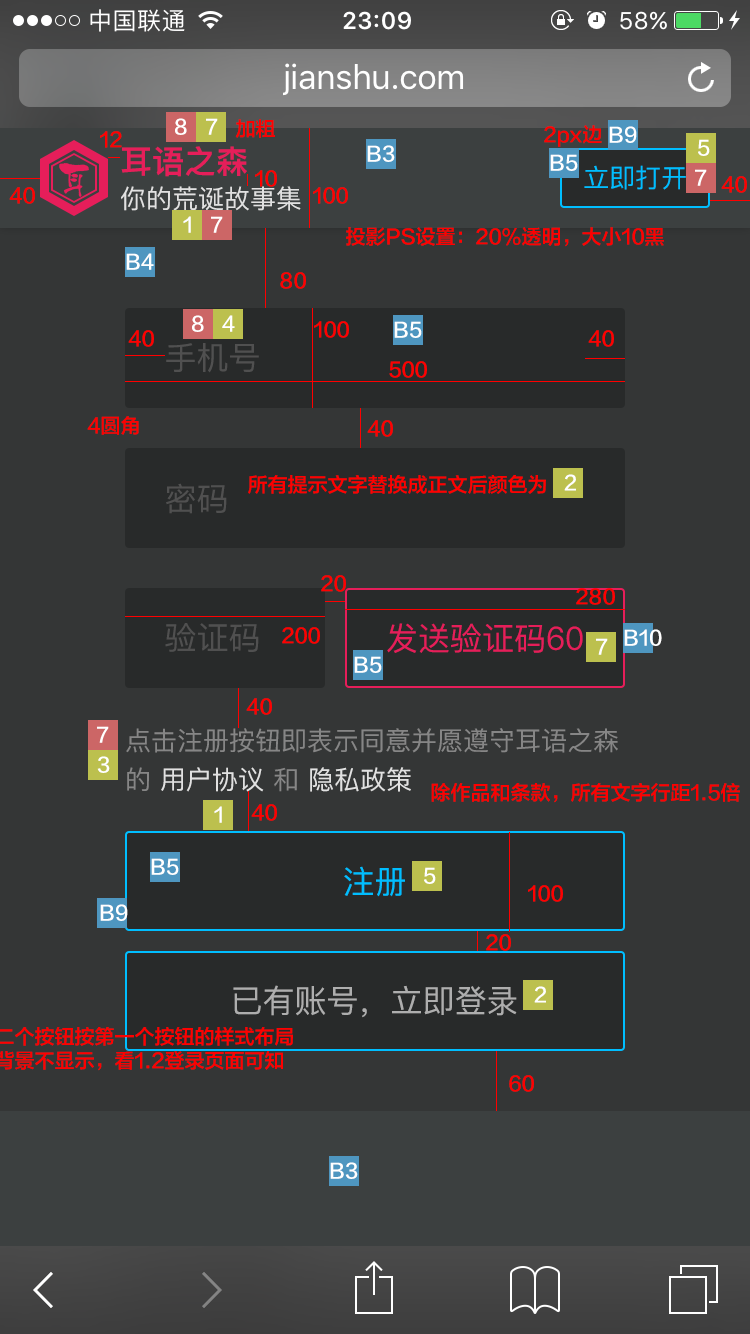
<style>
.page{position:relative;width:750px;height:1334px;background:#343636}
.page>*{position:absolute;margin:0}
.t1{font:20px "FZLTZHK--GBK1-0";color:#ffffff}
.t2{font:20px "FZLTZHK--GBK1-0";color:#ff0000}
.t3{font:32px "PingFangSC-Semibold";color:#e61e5a}
.t4{font:26px "PingFangSC-Regular";color:#00beff}
.t5{font:26px "PingFangSC-Regular";color:#e1e1e1}
.t6{font:32px "PingFangSC-Regular";color:#505050}
.t7{font:32px "PingFangSC-Regular";color:#e61e5a}
.t8{font:26px/39px "PingFangSC-Regular";color:#868686}
.t9{font:26px/39px "PingFangSC-Regular";color:#e1e1e1}
.t10{font:32px "PingFangSC-Regular";color:#00beff}
.t11{font:32px "PingFangSC-Regular";color:#aeaeae}
</style>
<div class="page">
<p class="t1" style="left:175px;top:118px;width:12px;height:17px">8</p>
<p class="t1" style="left:206px;top:118px;width:12px;height:17px">7</p>
<p class="t2" style="left:235px;top:119px;width:40px;height:19px">加粗</p>
<p class="t2" style="left:544px;top:125px;width:58px;height:22px">2px边</p>
<p class="t1" style="left:609px;top:126px;width:28px;height:17px">B9</p>
<p class="t2" style="left:100px;top:131px;width:22px;height:17px">12</p>
<p class="t3" style="left:121px;top:146px;width:126px;height:31px">耳语之森</p>
<p class="t1" style="left:367px;top:145px;width:28px;height:17px">B3</p>
<p class="t1" style="left:698px;top:139px;width:12px;height:17px">5</p>
<p class="t1" style="left:550px;top:154px;width:28px;height:17px">B5</p>
<p class="t2" style="left:255px;top:170px;width:22px;height:17px">10</p>
<p class="t4" style="left:584px;top:165px;width:102px;height:25px">立即打开</p>
<p class="t1" style="left:695px;top:169px;width:12px;height:17px">7</p>
<p class="t2" style="left:721px;top:176px;width:26px;height:17px">40</p>
<p class="t2" style="left:9px;top:187px;width:26px;height:17px">40</p>
<p class="t5" style="left:121px;top:186px;width:180px;height:25px">你的荒诞故事集</p>
<p class="t2" style="left:313px;top:187px;width:35px;height:17px">100</p>
<p class="t1" style="left:183px;top:216px;width:8px;height:17px">1</p>
<p class="t1" style="left:211px;top:216px;width:12px;height:17px">7</p>
<p class="t2" style="left:346px;top:227px;width:318px;height:20px">投影PS设置：20%透明，大小10黑</p>
<p class="t1" style="left:126px;top:253px;width:28px;height:17px">B4</p>
<p class="t2" style="left:280px;top:272px;width:26px;height:17px">80</p>
<p class="t1" style="left:192px;top:315px;width:12px;height:17px">8</p>
<p class="t1" style="left:222px;top:315px;width:13px;height:17px">4</p>
<p class="t2" style="left:314px;top:321px;width:35px;height:17px">100</p>
<p class="t1" style="left:394px;top:321px;width:28px;height:17px">B5</p>
<p class="t2" style="left:128px;top:330px;width:26px;height:17px">40</p>
<p class="t2" style="left:588px;top:330px;width:26px;height:17px">40</p>
<p class="t6" style="left:166px;top:343px;width:93px;height:30px">手机号</p>
<p class="t2" style="left:389px;top:361px;width:38px;height:17px">500</p>
<p class="t2" style="left:87px;top:416px;width:52px;height:19px">4圆角</p>
<p class="t2" style="left:367px;top:420px;width:26px;height:17px">40</p>
<p class="t6" style="left:166px;top:483px;width:61px;height:31px">密码</p>
<p class="t2" style="left:248px;top:475px;width:298px;height:19px">所有提示文字替换成正文后颜色为</p>
<p class="t1" style="left:564px;top:474px;width:12px;height:17px">2</p>
<p class="t2" style="left:321px;top:575px;width:25px;height:17px">20</p>
<p class="t2" style="left:576px;top:588px;width:39px;height:17px">280</p>
<p class="t6" style="left:165px;top:623px;width:94px;height:29px">验证码</p>
<p class="t2" style="left:282px;top:627px;width:38px;height:17px">200</p>
<p class="t7" style="left:387px;top:623px;width:196px;height:30px">发送验证码60</p>
<p class="t1" style="left:624px;top:629px;width:38px;height:17px">B10</p>
<p class="t1" style="left:596px;top:638px;width:12px;height:17px">7</p>
<p class="t1" style="left:354px;top:656px;width:28px;height:17px">B5</p>
<p class="t2" style="left:246px;top:698px;width:26px;height:17px">40</p>
<p class="t1" style="left:97px;top:726px;width:12px;height:17px">7</p>
<p class="t8" style="left:126px;top:728px;width:492px;height:64px">点击注册按钮即表示同意并愿遵守耳语之森<br>的 <span class="t9">用户协议</span> 和 <span class="t9">隐私政策</span></p>
<p class="t1" style="left:97px;top:756px;width:13px;height:17px">3</p>
<p class="t2" style="left:431px;top:783px;width:309px;height:20px">除作品和条款，所有文字行距1.5倍</p>
<p class="t1" style="left:214px;top:806px;width:8px;height:17px">1</p>
<p class="t2" style="left:251px;top:804px;width:26px;height:17px">40</p>
<p class="t1" style="left:151px;top:858px;width:28px;height:17px">B5</p>
<p class="t10" style="left:344px;top:866px;width:61px;height:31px">注册</p>
<p class="t1" style="left:424px;top:867px;width:12px;height:17px">5</p>
<p class="t2" style="left:528px;top:885px;width:35px;height:17px">100</p>
<p class="t1" style="left:100px;top:904px;width:28px;height:17px">B9</p>
<p class="t2" style="left:486px;top:934px;width:25px;height:17px">20</p>
<p class="t11" style="left:233px;top:985px;width:284px;height:33px">已有账号，立即登录</p>
<p class="t1" style="left:534px;top:986px;width:12px;height:17px">2</p>
<p class="t2" style="left:509px;top:1075px;width:25px;height:17px">60</p>
<p class="t1" style="left:330px;top:1162px;width:28px;height:17px">B3</p>
</div>
